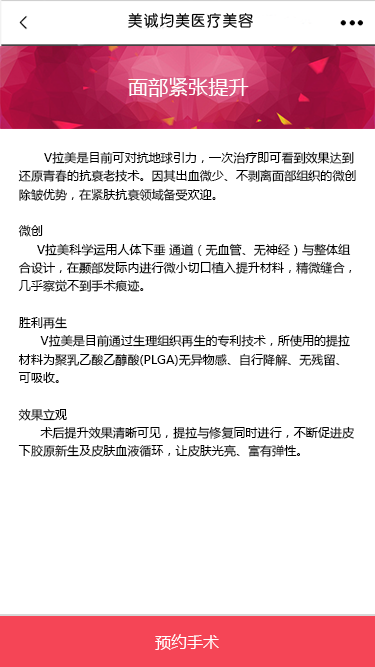
<style>
.page{position:relative;width:375px;height:667px;background:#ffffff}
.page>*{position:absolute;margin:0}
.t1{font:20px "MicrosoftYaHei";letter-spacing:0.005em;color:#ffffff}
.t2{font:12px/18.3px "MicrosoftYaHei";letter-spacing:0.005em;color:#000000}
.t3{font:16px "MicrosoftYaHei";letter-spacing:0.005em;color:#ffffff}
</style>
<div class="page">
<p class="t1" style="left:128px;top:77px;width:121px;height:20px">面部紧张提升</p>
<p class="t2" style="left:18px;top:151px;width:338px;height:306px">V拉美是目前可对抗地球引力，一次治疗即可看到效果达到<br>还原青春的抗衰老技术。因其出血微少、不剥离面部组织的微创<br>除皱优势，在紧肤抗衰领域备受欢迎。<br><br>微创<br>     V拉美科学运用人体下垂 通道（无血管、无神经）与整体组<br>合设计，在颞部发际内进行微小切口植入提升材料，精微缝合，<br>几乎察觉不到手术痕迹。<br><br>胜利再生<br>      V拉美是目前通过生理组织再生的专利技术，所使用的提拉<br>材料为聚乳乙酸乙醇酸(PLGA)无异物感、自行降解、无残留、 <br>可吸收。<br><br>效果立观<br>      术后提升效果清晰可见，提拉与修复同时进行，不断促进皮<br>下胶原新生及皮肤血液循环，让皮肤光亮、富有弹性。</p>
<p class="t3" style="left:155px;top:634px;width:64px;height:16px">预约手术</p>
</div>
